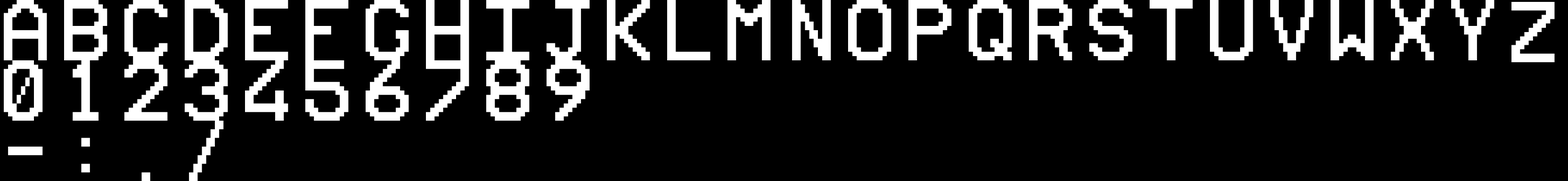
<style>
.page{position:relative;width:1568px;height:181px;background:#000000}
.page>*{position:absolute;margin:0}
.t1{font:60.3px "UAV-OSD-Mono";color:#ffffff}
</style>
<div class="page">
<p class="t1" style="left:4px;top:0px;width:43px;height:60px">A</p>
<p class="t1" style="left:64px;top:0px;width:43px;height:60px">B</p>
<p class="t1" style="left:124px;top:0px;width:44px;height:60px">C</p>
<p class="t1" style="left:185px;top:0px;width:43px;height:60px">D</p>
<p class="t1" style="left:245px;top:0px;width:43px;height:60px">E</p>
<p class="t1" style="left:305px;top:0px;width:44px;height:60px">F</p>
<p class="t1" style="left:366px;top:0px;width:43px;height:60px">G</p>
<p class="t1" style="left:426px;top:0px;width:43px;height:60px">H</p>
<p class="t1" style="left:486px;top:0px;width:44px;height:60px">I</p>
<p class="t1" style="left:547px;top:0px;width:43px;height:60px">J</p>
<p class="t1" style="left:607px;top:0px;width:43px;height:60px">K</p>
<p class="t1" style="left:667px;top:0px;width:43px;height:60px">L</p>
<p class="t1" style="left:727px;top:0px;width:44px;height:60px">M</p>
<p class="t1" style="left:792px;top:0px;width:39px;height:60px">N</p>
<p class="t1" style="left:848px;top:0px;width:43px;height:60px">O</p>
<p class="t1" style="left:908px;top:0px;width:44px;height:60px">P</p>
<p class="t1" style="left:969px;top:0px;width:43px;height:60px">Q</p>
<p class="t1" style="left:1029px;top:0px;width:43px;height:60px">R</p>
<p class="t1" style="left:1089px;top:0px;width:44px;height:60px">S</p>
<p class="t1" style="left:1150px;top:0px;width:43px;height:60px">T</p>
<p class="t1" style="left:1210px;top:0px;width:43px;height:60px">U</p>
<p class="t1" style="left:1270px;top:0px;width:44px;height:60px">V</p>
<p class="t1" style="left:1331px;top:0px;width:43px;height:60px">W</p>
<p class="t1" style="left:1391px;top:0px;width:43px;height:60px">X</p>
<p class="t1" style="left:1451px;top:0px;width:43px;height:60px">Y</p>
<p class="t1" style="left:1511px;top:2px;width:44px;height:60px">Z</p>
<p class="t1" style="left:4px;top:60px;width:39px;height:61px">0</p>
<p class="t1" style="left:73px;top:60px;width:26px;height:61px">1</p>
<p class="t1" style="left:124px;top:60px;width:44px;height:61px">2</p>
<p class="t1" style="left:185px;top:60px;width:43px;height:61px">3</p>
<p class="t1" style="left:245px;top:60px;width:43px;height:61px">4</p>
<p class="t1" style="left:305px;top:60px;width:44px;height:61px">5</p>
<p class="t1" style="left:366px;top:60px;width:43px;height:61px">6</p>
<p class="t1" style="left:426px;top:60px;width:43px;height:61px">7</p>
<p class="t1" style="left:486px;top:60px;width:44px;height:61px">8</p>
<p class="t1" style="left:547px;top:60px;width:43px;height:61px">9</p>
<p class="t1" style="left:189px;top:121px;width:35px;height:60px">/</p>
<p class="t1" style="left:81px;top:138px;width:9px;height:34px">:</p>
<p class="t1" style="left:8px;top:146px;width:35px;height:9px">-</p>
<p class="t1" style="left:141px;top:172px;width:9px;height:9px">.</p>
</div>
